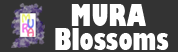
<style>
.page{position:relative;width:178px;height:52px;background:#333333}
.page>*{position:absolute;margin:0}
.t1{font:29.2px "GillSans-UltraBoldCondensed";color:#ffffff}
</style>
<div class="page">
<p class="t1" style="left:71px;top:4px;width:75px;height:22px">MURA</p>
<p class="t1" style="left:55px;top:28px;width:114px;height:22px">Blossoms</p>
</div>
